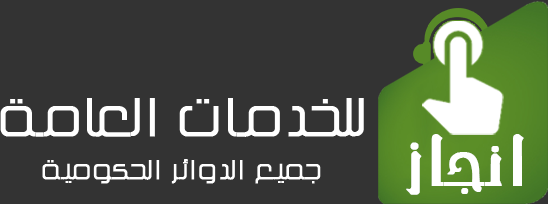
<style>
.page{position:relative;width:548px;height:204px;background:#333333}
.page>*{position:absolute;margin:0}
.t1{font:47px "KacstTitle";letter-spacing:0.05em;color:#ffffff;font-weight:bold}
.t2{font:61.5px "ae_Ostorah";letter-spacing:0.05em;color:#ffffff;font-weight:bold}
.t3{font:24px "KacstTitle";letter-spacing:0.05em;color:#ffffff;font-weight:bold}
</style>
<div class="page">
<p class="t1" style="left:0px;top:98px;width:364px;height:39px">للخدمات العامة</p>
<p class="t2" style="left:406px;top:134px;width:118px;height:61px">انجاز</p>
<p class="t3" style="left:42px;top:159px;width:279px;height:25px">جميع الدوائر الحكومية</p>
</div>
